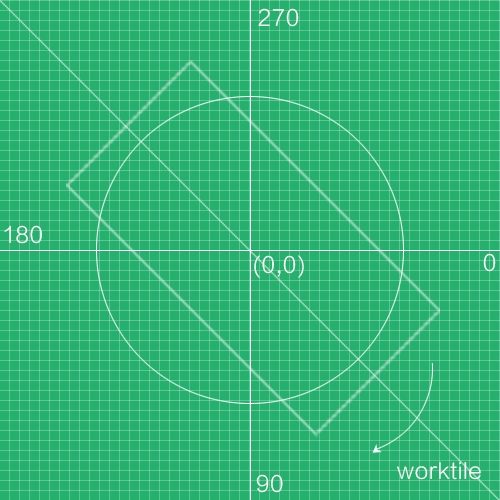
<style>
.page{position:relative;width:500px;height:500px;background:#25b06d}
.page>*{position:absolute;margin:0}
.t1{font:21.3px "FZLTXHK--GBK1-0";letter-spacing:0.05em;color:#ffffff}
</style>
<div class="page">
<p class="t1" style="left:258px;top:8px;width:41px;height:19px">270</p>
<p class="t1" style="left:4px;top:225px;width:38px;height:19px">180</p>
<p class="t1" style="left:254px;top:255px;width:50px;height:23px">(0,0)</p>
<p class="t1" style="left:483px;top:253px;width:13px;height:19px">0</p>
<p class="t1" style="left:397px;top:462px;width:84px;height:18px">worktile</p>
<p class="t1" style="left:256px;top:474px;width:27px;height:19px">90</p>
</div>
